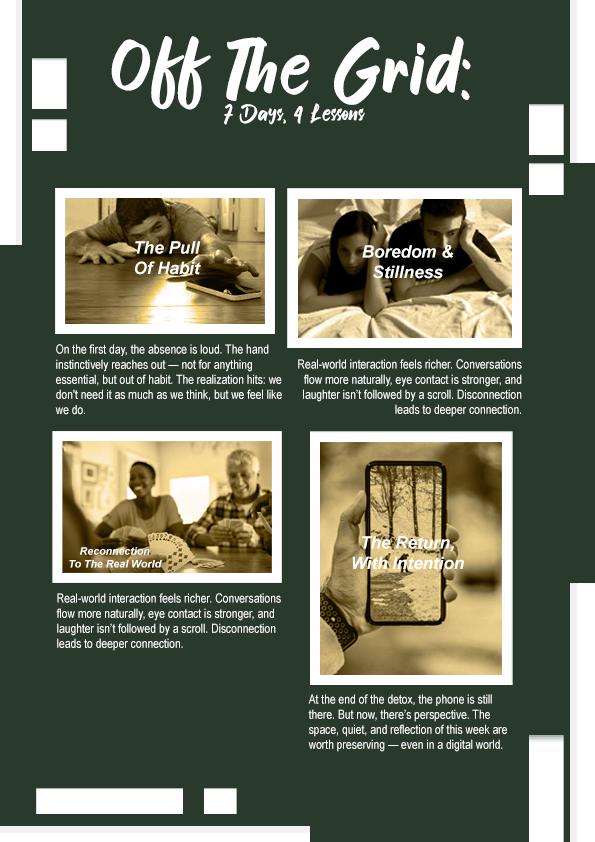
<style>
.page{position:relative;width:595px;height:842px;background:#293a2c}
.page>*{position:absolute;margin:0}
.t1{font:70.7px "SmileCandy";color:#ffffff;scale:1.07 1}
.t2{font:21.1px "SmileCandy";color:#ffffff}
.t3{font:17px "Arial-BoldItalicMT";color:#ffffff}
.t4{font:12.6px "ArialNarrow";color:#ffffff}
.t5{font:10.6px "Arial-BoldItalicMT";color:#ffffff}
</style>
<div class="page">
<p class="t1" style="left:111px;top:36px;width:360px;height:74px">Off The Grid:</p>
<p class="t2" style="left:224px;top:103px;width:141px;height:22px">7 Days, 4 Lessons</p>
<p class="t3" style="left:135px;top:241px;width:66px;height:34px;text-align:center">The Pull<br>Of Habit</p>
<p class="t3" style="left:362px;top:245px;width:92px;height:34px;text-align:center">Boredom &amp;<br>Stillness</p>
<p class="t4" style="left:55px;top:344px;width:227px;height:71px">On the first day, the absence is loud. The hand instinctively reaches out — not for anything essential, but out of habit. The realization hits: we don't need it as much as we think, but we feel like we do.</p>
<p class="t4" style="left:298px;top:359px;width:224px;height:58px;text-align:right">Real-world interaction feels richer. Conversations flow more naturally, eye contact is stronger, and laughter isn’t followed by a scroll. Disconnection leads to deeper connection.</p>
<p class="t3" style="left:352px;top:536px;width:112px;height:34px;text-align:center">The Return, <br>With Intention</p>
<p class="t5" style="left:69px;top:547px;width:93px;height:21px;text-align:center">Reconnection<br>To The Real World</p>
<p class="t4" style="left:56px;top:593px;width:225px;height:58px">Real-world interaction feels richer. Conversations flow more naturally, eye contact is stronger, and laughter isn’t followed by a scroll. Disconnection leads to deeper connection.</p>
<p class="t4" style="left:308px;top:694px;width:199px;height:58px">At the end of the detox, the phone is still there. But now, there’s perspective. The space, quiet, and reflection of this week are worth preserving — even in a digital world.</p>
</div>
